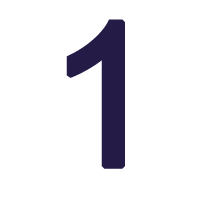
<style>
.page{position:relative;width:200px;height:200px;background:#ffffff}
.page>*{position:absolute;margin:0}
.t1{font:200px "ArialMT";color:#241b47;font-weight:bold}
</style>
<div class="page">
<p class="t1" style="left:66px;top:19px;width:59px;height:150px">1</p>
</div>
